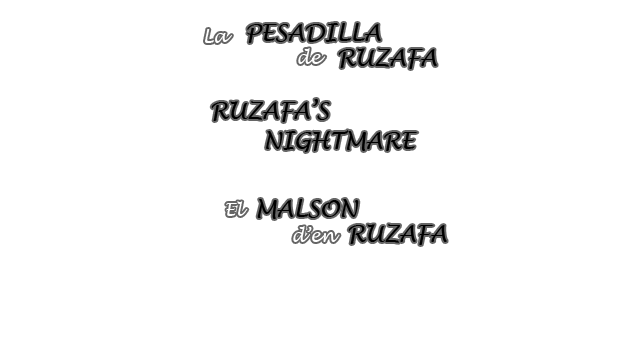
<style>
.page{position:relative;width:640px;height:360px;background:#ffffff}
.page>*{position:absolute;margin:0}
.t1{font:17.5px "LucidaHandwriting-Italic";color:#ffffff}
.t2{font:22.5px "LucidaHandwriting-Italic";color:#000000}
.t3{font:22.5px/30px "LucidaHandwriting-Italic";color:#000000}
</style>
<div class="page">
<p class="t1" style="left:205px;top:29px;width:27px;height:14px">La</p>
<p class="t2" style="left:247px;top:23px;width:134px;height:20px">PESADILLA</p>
<p class="t1" style="left:298px;top:48px;width:28px;height:16px">de</p>
<p class="t2" style="left:338px;top:48px;width:99px;height:21px">RUZAFA</p>
<p class="t3" style="left:211px;top:99px;width:207px;height:53px">RUZAFA’S<br>       NIGHTMARE</p>
<p class="t1" style="left:226px;top:201px;width:22px;height:15px">El</p>
<p class="t2" style="left:257px;top:199px;width:102px;height:20px">MALSON</p>
<p class="t1" style="left:293px;top:226px;width:47px;height:16px">d’en</p>
<p class="t2" style="left:348px;top:224px;width:99px;height:21px">RUZAFA</p>
</div>
